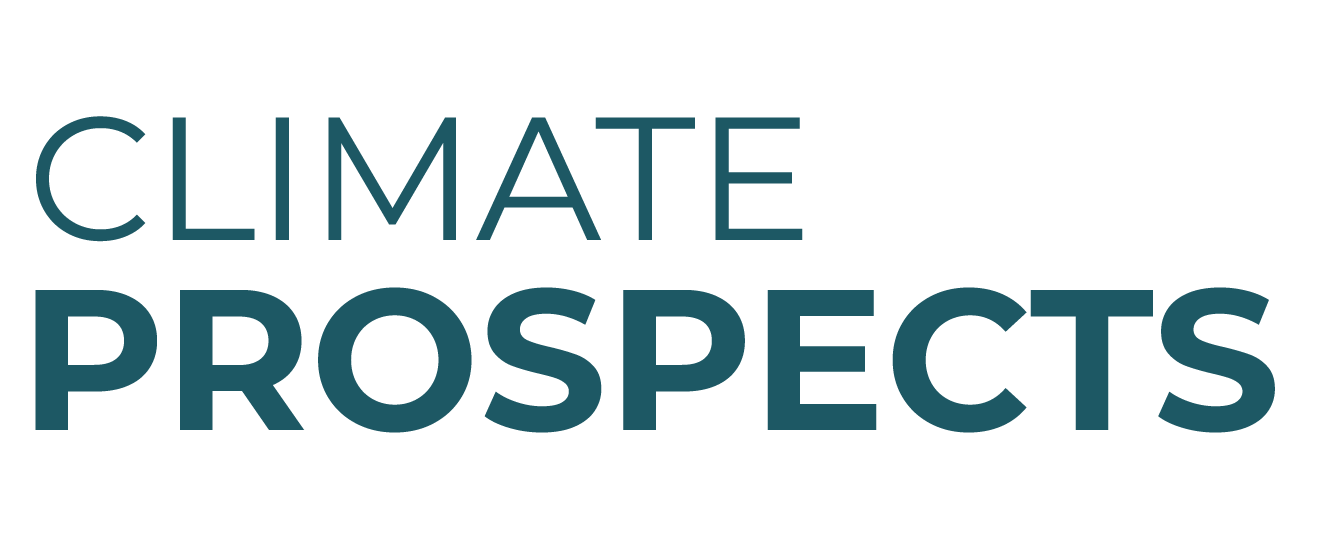
<style>
.page{position:relative;width:1318px;height:536px;background:#ffffff}
.page>*{position:absolute;margin:0}
.t1{font:175px "Montserrat-Regular";color:#1d5864}
.t2{font:200px "Montserrat-Bold";color:#1d5864}
</style>
<div class="page">
<p class="t1" style="left:36px;top:116px;width:767px;height:126px">CLIMATE</p>
<p class="t2" style="left:35px;top:287px;width:1240px;height:146px">PROSPECTS</p>
</div>
